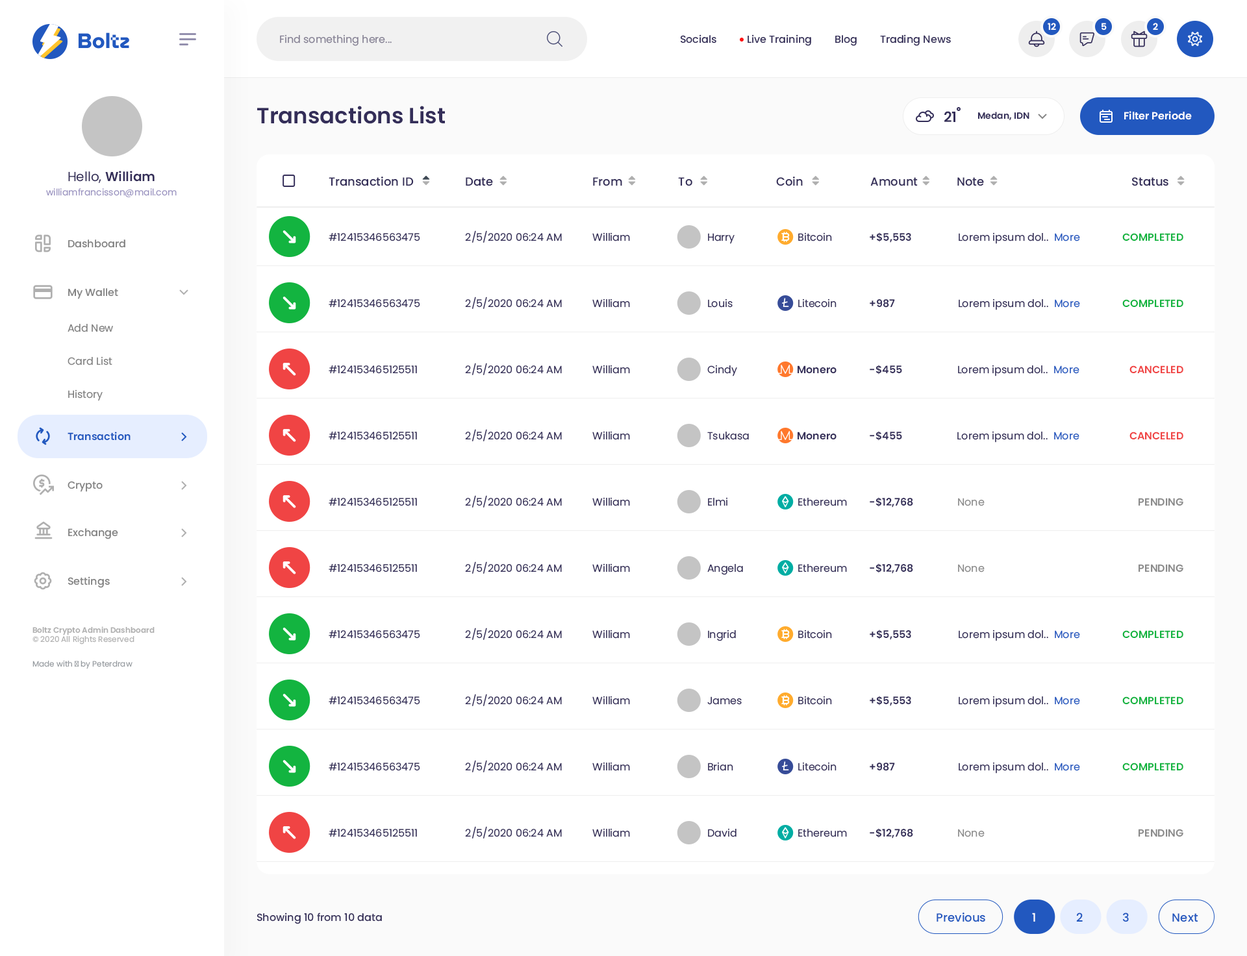
<style>
.page{position:relative;width:1247px;height:956px;background:#ffffff}
.page>*{position:absolute;margin:0}
.t1{font:9.1px "Poppins-SemiBold";color:#ffffff}
.t2{font:10.4px "Poppins-Regular";color:#868295}
.t3{font:10.4px "Poppins-Medium";color:#342e59}
.t4{font:22.1px "Poppins-SemiBold";color:#342e59}
.t5{font:14.3px "Poppins-SemiBold";color:#342e59}
.t6{font:9.1px "Poppins-SemiBold";color:#342e59}
.t7{font:10.4px "Poppins-SemiBold";color:#ffffff}
.t8{font:13px "Poppins-SemiBold";color:#342e59}
.t9{font:13px "Poppins-Regular";color:#342e59}
.t10{font:11.7px "Poppins-Medium";color:#342e59}
.t11{font:9.1px "Poppins-Regular";color:#9b94c1}
.t12{font:10.4px "Poppins-Regular";color:#342e59}
.t13{font:10.4px "Poppins-SemiBold";color:#342e59}
.t14{font:10.4px "Poppins-Regular";color:#2258bf}
.t15{font:10.4px "Poppins-SemiBold";color:#13b440}
.t16{font:10.4px "Poppins-Medium";color:#818181}
.t17{font:10.4px "Poppins-Regular";color:#818181}
.t18{font:10.4px "Poppins-SemiBold";color:#f04444}
.t19{font:10.4px "Poppins-SemiBold";color:#2258bf}
.t20{font:10.4px "Poppins-Regular";color:#8b8b8b}
.t21{font:10.4px "Poppins-SemiBold";color:#8b8b8b}
.t22{font:7.8px "Poppins-SemiBold";color:#afafaf}
.t23{font:7.8px "Poppins-Regular";color:#afafaf}
.t24{font:7.8px "Poppins-Regular";color:#969ba0}
.t25{font:11.7px "Poppins-Medium";color:#2258bf}
.t26{font:11.7px "Poppins-Medium";color:#ffffff}
</style>
<div class="page">
<p class="t1" style="left:1047px;top:23px;width:9px;height:8px">12</p>
<p class="t1" style="left:1101px;top:23px;width:5px;height:8px">5</p>
<p class="t1" style="left:1153px;top:23px;width:5px;height:7px">2</p>
<p class="t2" style="left:280px;top:34px;width:112px;height:12px">Find something here...</p>
<p class="t3" style="left:680px;top:34px;width:36px;height:10px">Socials</p>
<p class="t3" style="left:747px;top:34px;width:64px;height:12px">Live Training</p>
<p class="t3" style="left:835px;top:35px;width:21px;height:11px">Blog</p>
<p class="t3" style="left:880px;top:34px;width:71px;height:12px">Trading News</p>
<p class="t4" style="left:257px;top:106px;width:188px;height:18px">Transactions List</p>
<p class="t5" style="left:944px;top:111px;width:11px;height:11px">21</p>
<p class="t6" style="left:977px;top:112px;width:52px;height:9px">Medan, IDN</p>
<p class="t7" style="left:1124px;top:111px;width:68px;height:9px">Filter Periode</p>
<p class="t8" style="left:68px;top:171px;width:87px;height:12px"><span class="t9">Hello, </span>William</p>
<p class="t10" style="left:329px;top:177px;width:85px;height:9px">Transaction ID</p>
<p class="t10" style="left:466px;top:177px;width:27px;height:9px">Date</p>
<p class="t10" style="left:593px;top:177px;width:29px;height:9px">From</p>
<p class="t10" style="left:678px;top:177px;width:14px;height:9px">To</p>
<p class="t10" style="left:776px;top:177px;width:27px;height:9px">Coin</p>
<p class="t10" style="left:870px;top:177px;width:48px;height:9px">Amount</p>
<p class="t10" style="left:957px;top:177px;width:27px;height:9px">Note</p>
<p class="t10" style="left:1132px;top:177px;width:36px;height:9px">Status</p>
<p class="t11" style="left:46px;top:188px;width:131px;height:9px">williamfrancisson@mail.com</p>
<p class="t12" style="left:329px;top:233px;width:91px;height:9px">#12415346563475</p>
<p class="t12" style="left:465px;top:231px;width:97px;height:12px">2/5/2020 06:24 AM</p>
<p class="t12" style="left:592px;top:232px;width:38px;height:10px">William</p>
<p class="t12" style="left:708px;top:233px;width:26px;height:11px">Harry</p>
<p class="t12" style="left:798px;top:232px;width:34px;height:10px">Bitcoin</p>
<p class="t13" style="left:869px;top:232px;width:42px;height:11px">+$5,553</p>
<p class="t12" style="left:958px;top:232px;width:122px;height:12px">Lorem ipsum dol..  <span class="t14">More</span></p>
<p class="t15" style="left:1122px;top:233px;width:61px;height:8px">COMPLETED</p>
<p class="t16" style="left:68px;top:240px;width:57px;height:8px">Dashboard</p>
<p class="t16" style="left:68px;top:288px;width:50px;height:11px">My Wallet</p>
<p class="t12" style="left:329px;top:299px;width:91px;height:9px">#12415346563475</p>
<p class="t12" style="left:465px;top:297px;width:97px;height:12px">2/5/2020 06:24 AM</p>
<p class="t12" style="left:592px;top:299px;width:38px;height:9px">William</p>
<p class="t12" style="left:708px;top:299px;width:24px;height:9px">Louis</p>
<p class="t12" style="left:798px;top:299px;width:38px;height:9px">Litecoin</p>
<p class="t13" style="left:869px;top:299px;width:26px;height:9px">+987</p>
<p class="t12" style="left:958px;top:299px;width:122px;height:11px">Lorem ipsum dol..  <span class="t14">More</span></p>
<p class="t15" style="left:1122px;top:299px;width:61px;height:8px">COMPLETED</p>
<p class="t17" style="left:68px;top:324px;width:45px;height:8px">Add New</p>
<p class="t17" style="left:68px;top:356px;width:44px;height:10px">Card List</p>
<p class="t12" style="left:329px;top:366px;width:88px;height:8px">#124153465125511</p>
<p class="t12" style="left:465px;top:363px;width:97px;height:12px">2/5/2020 06:24 AM</p>
<p class="t12" style="left:592px;top:365px;width:38px;height:9px">William</p>
<p class="t12" style="left:707px;top:365px;width:30px;height:12px">Cindy</p>
<p class="t13" style="left:797px;top:366px;width:39px;height:8px">Monero</p>
<p class="t13" style="left:869px;top:365px;width:33px;height:10px">-$455</p>
<p class="t12" style="left:958px;top:365px;width:121px;height:12px">Lorem ipsum dol..  <span class="t14">More</span></p>
<p class="t18" style="left:1129px;top:366px;width:54px;height:7px">CANCELED</p>
<p class="t17" style="left:68px;top:390px;width:35px;height:11px">History</p>
<p class="t19" style="left:68px;top:432px;width:63px;height:9px">Transaction</p>
<p class="t12" style="left:329px;top:432px;width:88px;height:8px">#124153465125511</p>
<p class="t12" style="left:465px;top:429px;width:97px;height:13px">2/5/2020 06:24 AM</p>
<p class="t12" style="left:592px;top:431px;width:38px;height:9px">William</p>
<p class="t12" style="left:707px;top:432px;width:42px;height:8px">Tsukasa</p>
<p class="t13" style="left:797px;top:432px;width:39px;height:8px">Monero</p>
<p class="t13" style="left:869px;top:431px;width:33px;height:10px">-$455</p>
<p class="t12" style="left:957px;top:431px;width:122px;height:12px">Lorem ipsum dol..  <span class="t14">More</span></p>
<p class="t18" style="left:1129px;top:432px;width:54px;height:8px">CANCELED</p>
<p class="t16" style="left:68px;top:481px;width:35px;height:11px">Crypto</p>
<p class="t12" style="left:465px;top:495px;width:97px;height:13px">2/5/2020 06:24 AM</p>
<p class="t12" style="left:592px;top:497px;width:38px;height:9px">William</p>
<p class="t12" style="left:708px;top:497px;width:19px;height:9px">Elmi</p>
<p class="t13" style="left:869px;top:497px;width:44px;height:11px">-$12,768</p>
<p class="t12" style="left:329px;top:498px;width:88px;height:8px">#124153465125511</p>
<p class="t12" style="left:798px;top:498px;width:49px;height:8px">Ethereum</p>
<p class="t20" style="left:958px;top:498px;width:26px;height:8px">None</p>
<p class="t21" style="left:1138px;top:498px;width:45px;height:8px">PENDING</p>
<p class="t16" style="left:68px;top:529px;width:50px;height:11px">Exchange</p>
<p class="t12" style="left:329px;top:564px;width:88px;height:9px">#124153465125511</p>
<p class="t12" style="left:465px;top:562px;width:97px;height:12px">2/5/2020 06:24 AM</p>
<p class="t12" style="left:592px;top:564px;width:38px;height:9px">William</p>
<p class="t12" style="left:707px;top:564px;width:36px;height:11px">Angela</p>
<p class="t12" style="left:798px;top:564px;width:49px;height:9px">Ethereum</p>
<p class="t13" style="left:869px;top:564px;width:44px;height:10px">-$12,768</p>
<p class="t20" style="left:958px;top:564px;width:26px;height:9px">None</p>
<p class="t21" style="left:1138px;top:564px;width:45px;height:8px">PENDING</p>
<p class="t16" style="left:68px;top:577px;width:42px;height:11px">Settings</p>
<p class="t22" style="left:32px;top:627px;width:123px;height:18px">Boltz Crypto Admin Dashboard<br><span class="t23">© 2020 All Rights Reserved</span></p>
<p class="t12" style="left:465px;top:628px;width:97px;height:12px">2/5/2020 06:24 AM</p>
<p class="t12" style="left:592px;top:630px;width:38px;height:9px">William</p>
<p class="t12" style="left:708px;top:630px;width:28px;height:12px">Ingrid</p>
<p class="t12" style="left:798px;top:630px;width:34px;height:9px">Bitcoin</p>
<p class="t13" style="left:869px;top:630px;width:42px;height:10px">+$5,553</p>
<p class="t12" style="left:958px;top:630px;width:122px;height:12px">Lorem ipsum dol..  <span class="t14">More</span></p>
<p class="t12" style="left:329px;top:630px;width:91px;height:9px">#12415346563475</p>
<p class="t15" style="left:1122px;top:630px;width:61px;height:8px">COMPLETED</p>
<p class="t24" style="left:32px;top:660px;width:100px;height:9px">Made with ♥ by Peterdraw</p>
<p class="t12" style="left:329px;top:697px;width:91px;height:8px">#12415346563475</p>
<p class="t12" style="left:465px;top:694px;width:97px;height:12px">2/5/2020 06:24 AM</p>
<p class="t12" style="left:592px;top:696px;width:38px;height:9px">William</p>
<p class="t12" style="left:707px;top:697px;width:35px;height:8px">James</p>
<p class="t12" style="left:798px;top:696px;width:34px;height:9px">Bitcoin</p>
<p class="t13" style="left:869px;top:696px;width:42px;height:10px">+$5,553</p>
<p class="t12" style="left:958px;top:696px;width:122px;height:12px">Lorem ipsum dol..  <span class="t14">More</span></p>
<p class="t15" style="left:1122px;top:697px;width:61px;height:8px">COMPLETED</p>
<p class="t12" style="left:465px;top:760px;width:97px;height:13px">2/5/2020 06:24 AM</p>
<p class="t12" style="left:329px;top:763px;width:91px;height:8px">#12415346563475</p>
<p class="t12" style="left:592px;top:762px;width:38px;height:9px">William</p>
<p class="t12" style="left:708px;top:762px;width:25px;height:9px">Brian</p>
<p class="t12" style="left:798px;top:762px;width:38px;height:9px">Litecoin</p>
<p class="t13" style="left:869px;top:763px;width:26px;height:8px">+987</p>
<p class="t12" style="left:958px;top:762px;width:122px;height:12px">Lorem ipsum dol..  <span class="t14">More</span></p>
<p class="t15" style="left:1122px;top:763px;width:61px;height:8px">COMPLETED</p>
<p class="t12" style="left:329px;top:829px;width:88px;height:9px">#124153465125511</p>
<p class="t12" style="left:465px;top:827px;width:97px;height:12px">2/5/2020 06:24 AM</p>
<p class="t12" style="left:592px;top:829px;width:38px;height:9px">William</p>
<p class="t12" style="left:708px;top:829px;width:28px;height:9px">David</p>
<p class="t12" style="left:798px;top:829px;width:49px;height:9px">Ethereum</p>
<p class="t13" style="left:869px;top:829px;width:44px;height:10px">-$12,768</p>
<p class="t20" style="left:958px;top:829px;width:26px;height:9px">None</p>
<p class="t21" style="left:1138px;top:829px;width:45px;height:8px">PENDING</p>
<p class="t3" style="left:257px;top:913px;width:125px;height:12px">Showing 10 from 10 data</p>
<p class="t25" style="left:936px;top:913px;width:49px;height:10px">Previous</p>
<p class="t26" style="left:1032px;top:913px;width:3px;height:10px">1</p>
<p class="t25" style="left:1076px;top:913px;width:6px;height:9px">2</p>
<p class="t25" style="left:1122px;top:913px;width:7px;height:10px">3</p>
<p class="t25" style="left:1172px;top:914px;width:26px;height:9px">Next</p>
</div>
